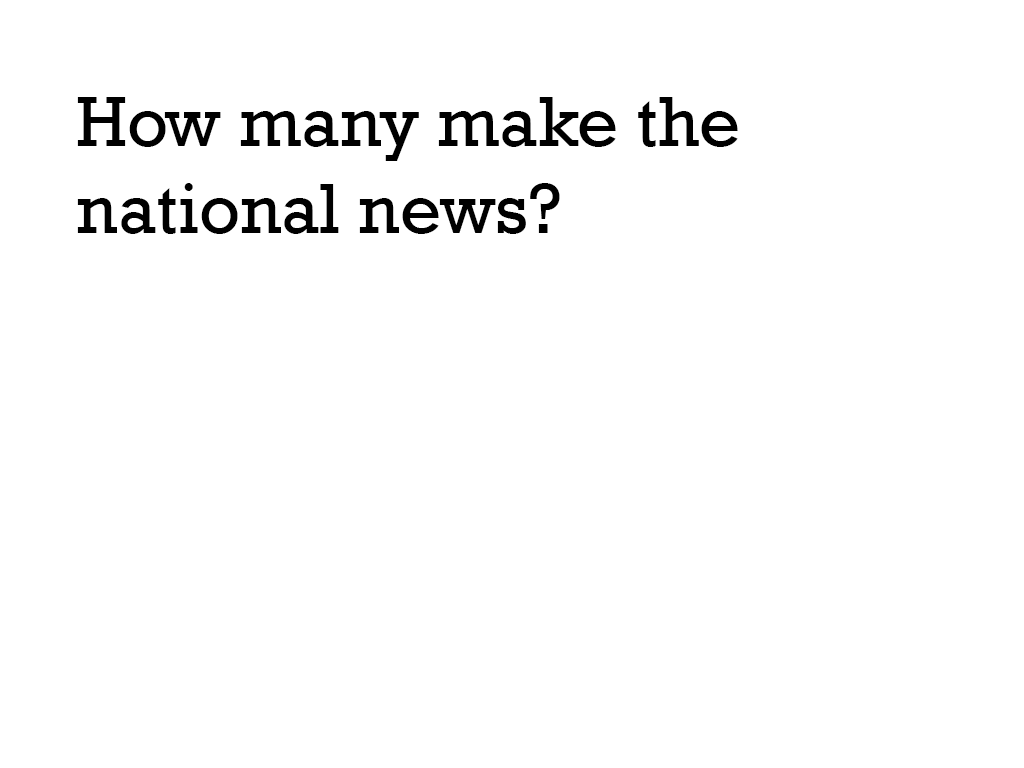
<style>
.page{position:relative;width:1024px;height:768px;background:#ffffff}
.page>*{position:absolute;margin:0}
.t1{font:72px "Rockwell";color:#000000}
</style>
<div class="page">
<p class="t1" style="left:77px;top:97px;width:661px;height:137px">How many make the <br>national news?</p>
</div>
